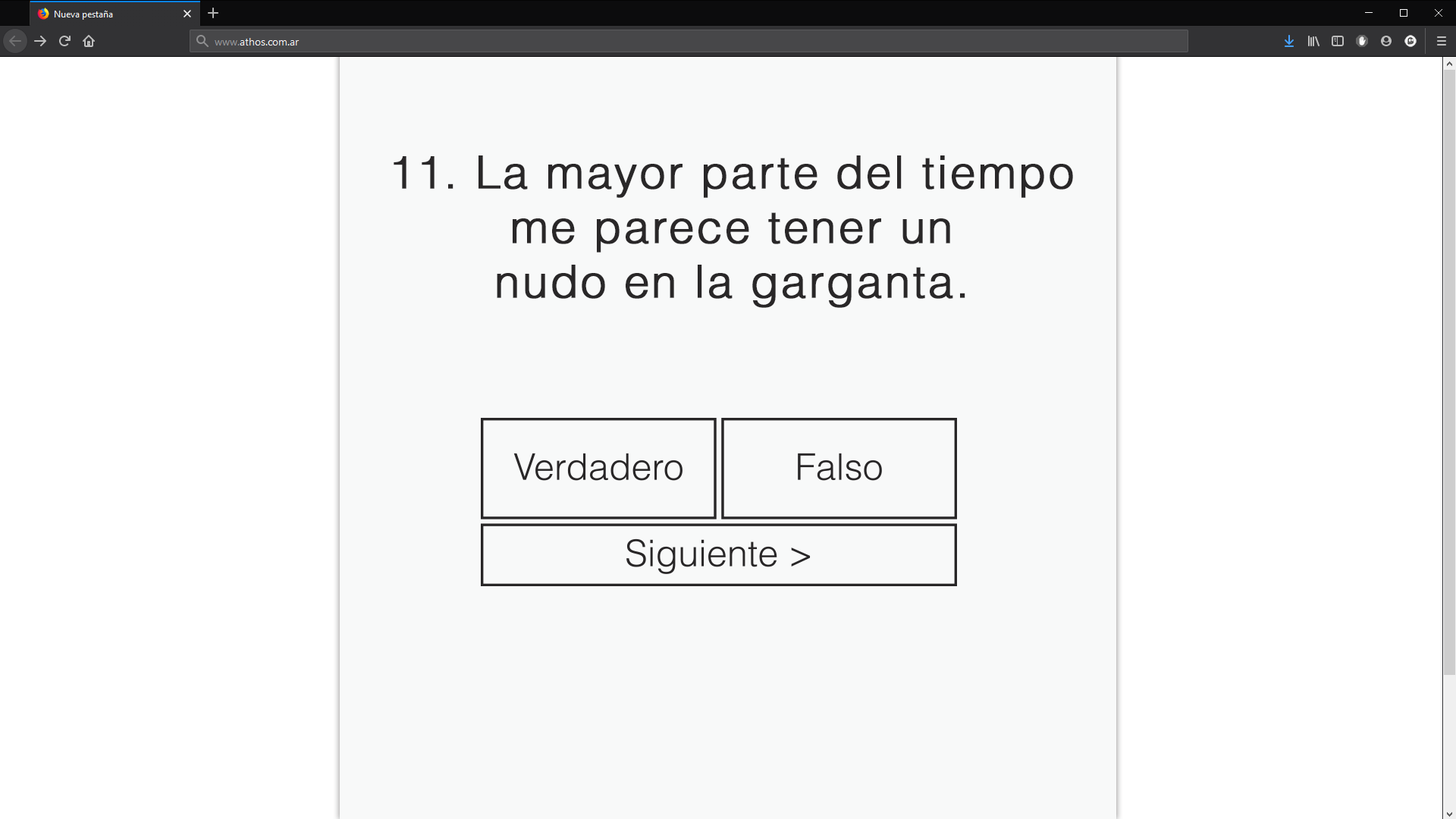
<style>
.page{position:relative;width:1456px;height:819px;background:#ffffff}
.page>*{position:absolute;margin:0}
.t1{font:45.5px "HelveticaLTStd-Light";letter-spacing:0.03em;color:#292728;font-weight:bold}
</style>
<div class="page">
<p class="t1" style="left:394px;top:155px;width:679px;height:153px;text-align:center">11. La mayor parte del tiempo me parece tener un<br>nudo en la garganta.</p>
</div>
